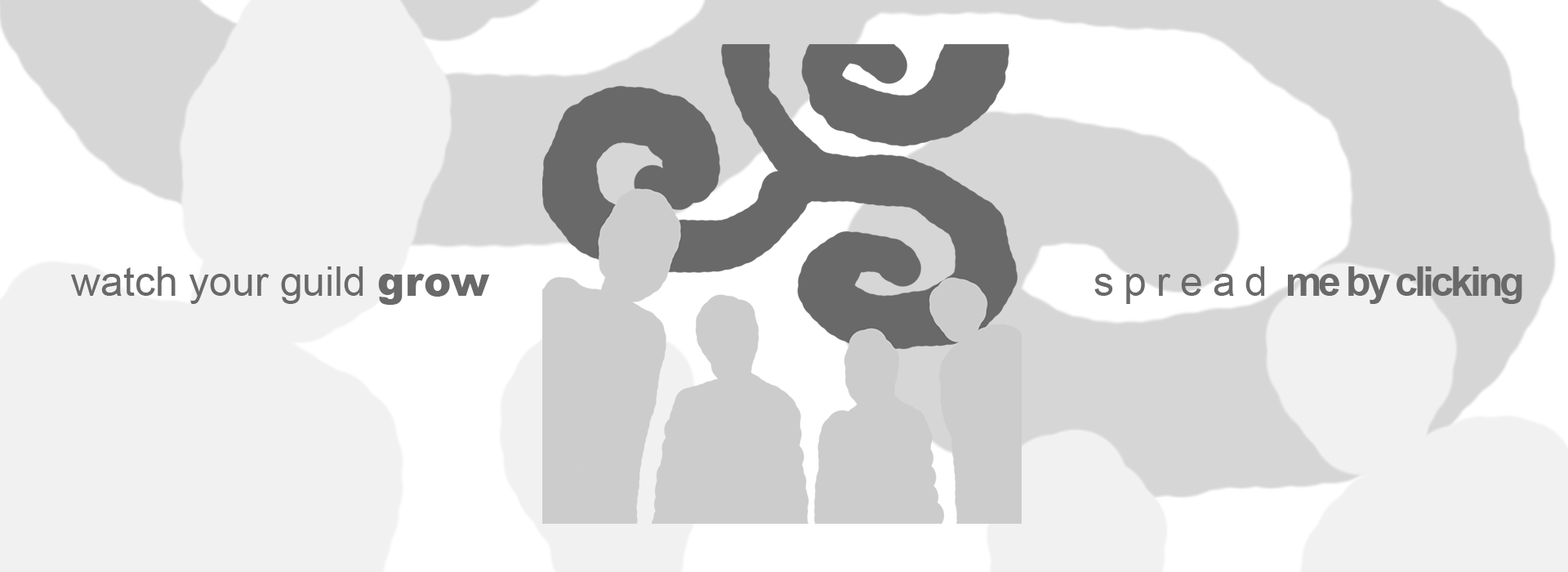
<style>
.page{position:relative;width:1568px;height:572px;background:#f1f1f1}
.page>*{position:absolute;margin:0}
.t1{font:40.8px "ArialMT";color:#696969}
.t2{font:40.8px "Arial-Black";color:#696969}
.t3{font:40.8px "Arial-BoldMT";letter-spacing:-0.08em;color:#696969}
.t4{font:40.8px "ArialMT";letter-spacing:0.24em;color:#696969}
</style>
<div class="page">
<p class="t1" style="left:71px;top:266px;width:419px;height:39px">watch your guild <span class="t2">grow</span></p>
<p class="t3" style="left:1094px;top:266px;width:428px;height:38px"><span class="t4">spread</span> me by clicking</p>
</div>
